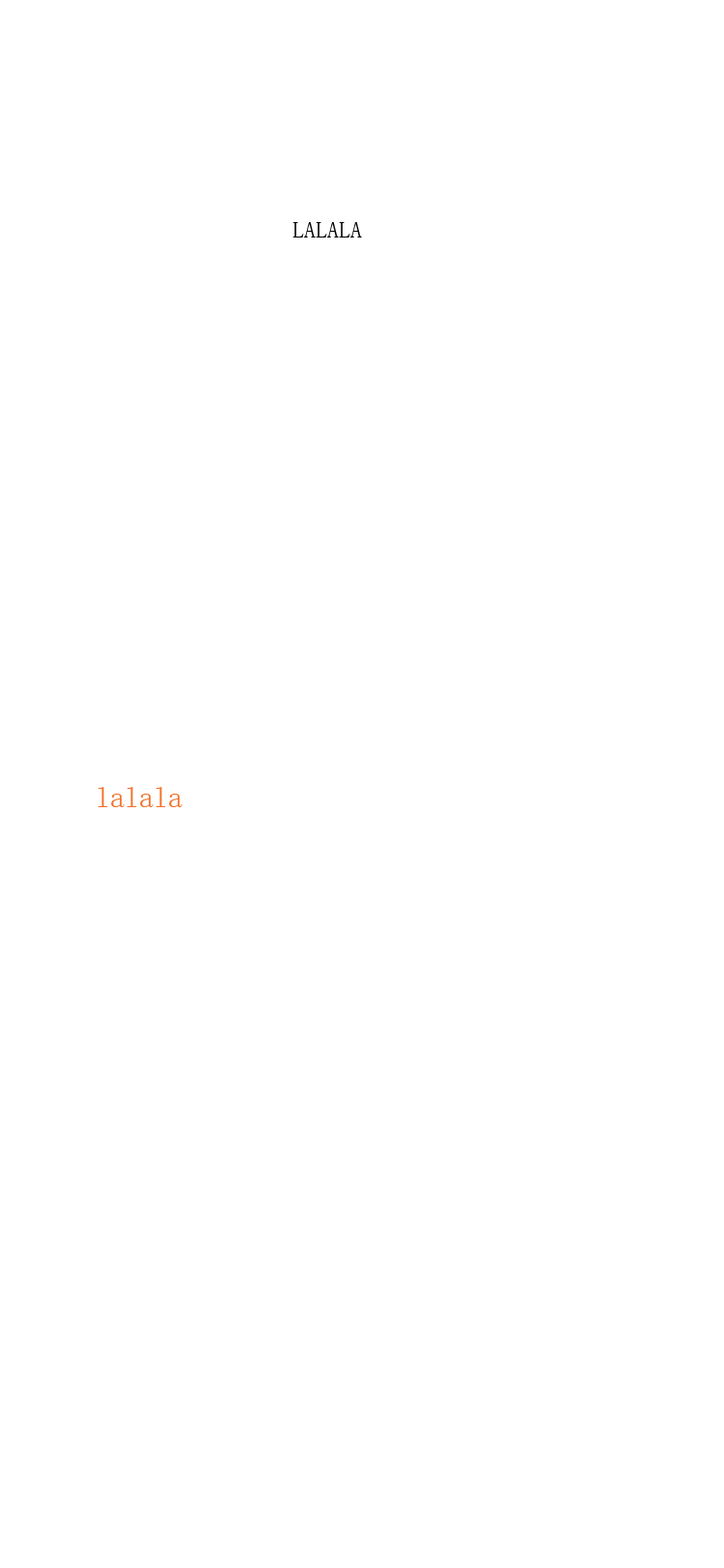
<style>
.page{position:relative;width:724px;height:1568px;background:#ffffff}
.page>*{position:absolute;margin:0}
.t1{font:23.2px "SimSun";color:#000000}
.t2{font:29px "SimSun";color:#f07029}
</style>
<div class="page">
<p class="t1" style="left:293px;top:222px;width:69px;height:16px">LALALA</p>
<p class="t2" style="left:98px;top:787px;width:84px;height:20px">lalala</p>
</div>
